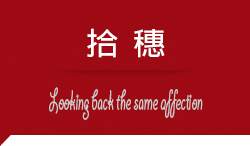
<style>
.page{position:relative;width:250px;height:146px;background:#9e0a14}
.page>*{position:absolute;margin:0}
.t1{font:31px "AdobeFanHeitiStd-Bold";color:#ffffff;scale:1.06 1}
.t2{font:32px "GiddyupStd";color:#cacaca;scale:0.51 1}
</style>
<div class="page">
<p class="t1" style="left:87px;top:28px;width:78px;height:30px">拾  穗</p>
<p class="t2" style="left:49px;top:87px;width:154px;height:33px">Looking back the same affection</p>
</div>
